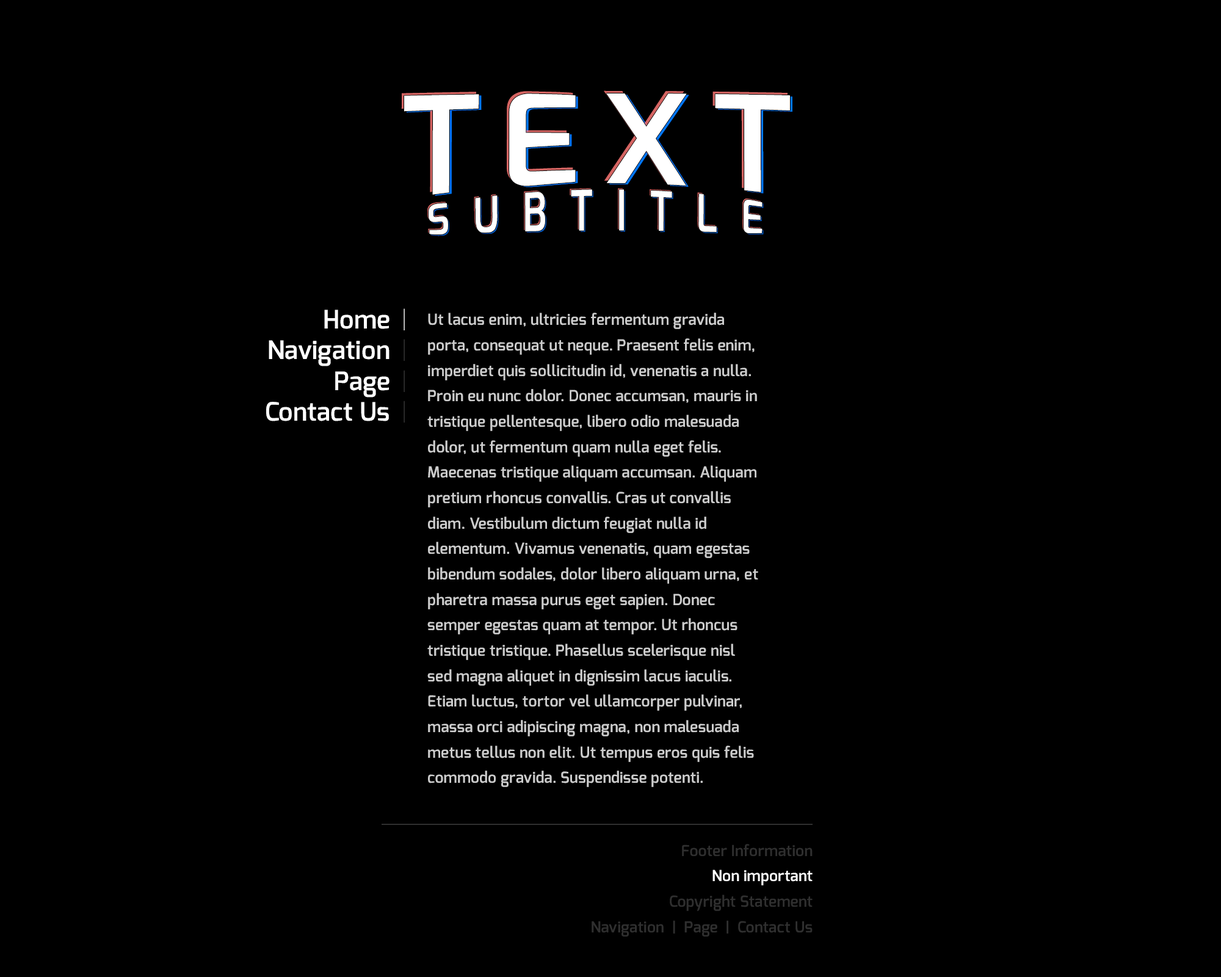
<style>
.page{position:relative;width:1221px;height:977px;background:#000000}
.page>*{position:absolute;margin:0}
.t1{font:141px "Exo-DemiBold";letter-spacing:0.15em;color:#ffffff}
.t2{font:39.1px "Exo-DemiBold";letter-spacing:0.61em;color:#ffffff}
.t3{font:25.5px "Exo-DemiBold";letter-spacing:0.01em;color:#ffffff}
.t4{font:25.5px "Exo-DemiBold";letter-spacing:0.01em;color:#ffffff;scale:0.32 1}
.t5{font:25.5px "Exo-DemiBold";letter-spacing:0.01em;color:#3c3c3c;scale:0.32 1}
.t6{font:15.3px/25.4px "Exo-DemiBold";letter-spacing:0.01em;color:#cccccc}
.t7{font:15.3px/25.4px "Exo-DemiBold";letter-spacing:0.01em;color:#2f2f2f}
.t8{font:15.3px/25.4px "Exo-DemiBold";letter-spacing:0.01em;color:#ffffff}
</style>
<div class="page">
<p class="t1" style="left:401px;top:90px;width:386px;height:102px">TEXT</p>
<p class="t1" style="left:404px;top:93px;width:386px;height:102px">TEXT</p>
<p class="t1" style="left:407px;top:95px;width:385px;height:101px">TEXT</p>
<p class="t2" style="left:427px;top:188px;width:334px;height:45px">SUBTITLE</p>
<p class="t2" style="left:429px;top:189px;width:333px;height:45px">SUBTITLE</p>
<p class="t2" style="left:430px;top:190px;width:334px;height:46px">SUBTITLE</p>
<p class="t3" style="left:266px;top:308px;width:139px;height:114px;text-align:right">Home  <span class="t4">|<br></span>Navigation  <span class="t5">|<br></span>  Page  <span class="t5">|<br></span>  Contact Us  <span class="t5">|</span></p>
<p class="t6" style="left:427px;top:313px;width:331px;height:474px">Ut lacus enim, ultricies fermentum gravida porta, consequat ut neque. Praesent felis enim, imperdiet quis sollicitudin id, venenatis a nulla. Proin eu nunc dolor. Donec accumsan, mauris in tristique pellentesque, libero odio malesuada dolor, ut fermentum quam nulla eget felis. Maecenas tristique aliquam accumsan. Aliquam pretium rhoncus convallis. Cras ut convallis diam. Vestibulum dictum feugiat nulla id elementum. Vivamus venenatis, quam egestas bibendum sodales, dolor libero aliquam urna, et pharetra massa purus eget sapien. Donec semper egestas quam at tempor. Ut rhoncus tristique tristique. Phasellus scelerisque nisl sed magna aliquet in dignissim lacus iaculis. Etiam luctus, tortor vel ullamcorper pulvinar, massa orci adipiscing magna, non malesuada metus tellus non elit. Ut tempus eros quis felis commodo gravida. Suspendisse potenti.</p>
<p class="t7" style="left:592px;top:844px;width:220px;height:92px;text-align:right">Footer Information<br><span class="t8">Non important<br></span>Copyright Statement<br>Navigation  |  Page  |  Contact Us</p>
</div>
